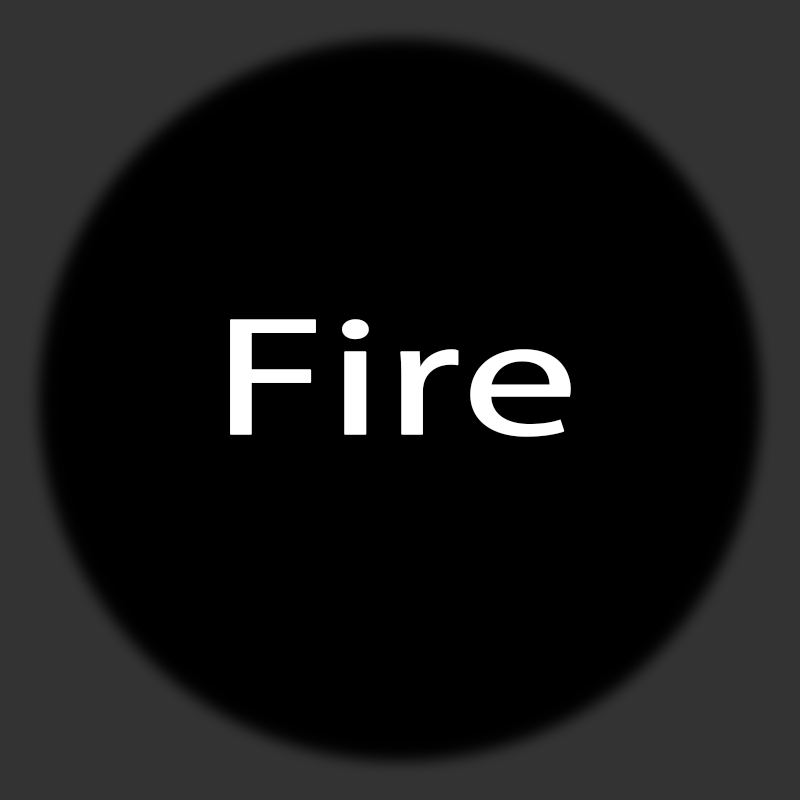
<style>
.page{position:relative;width:800px;height:800px;background:#000000}
.page>*{position:absolute;margin:0}
.t1{font:168.8px "MyriadPro-Regular";letter-spacing:-0.02em;color:#ffffff;font-weight:bold;scale:1.38 1}
</style>
<div class="page">
<p class="t1" style="left:230px;top:319px;width:341px;height:118px">Fire</p>
</div>
